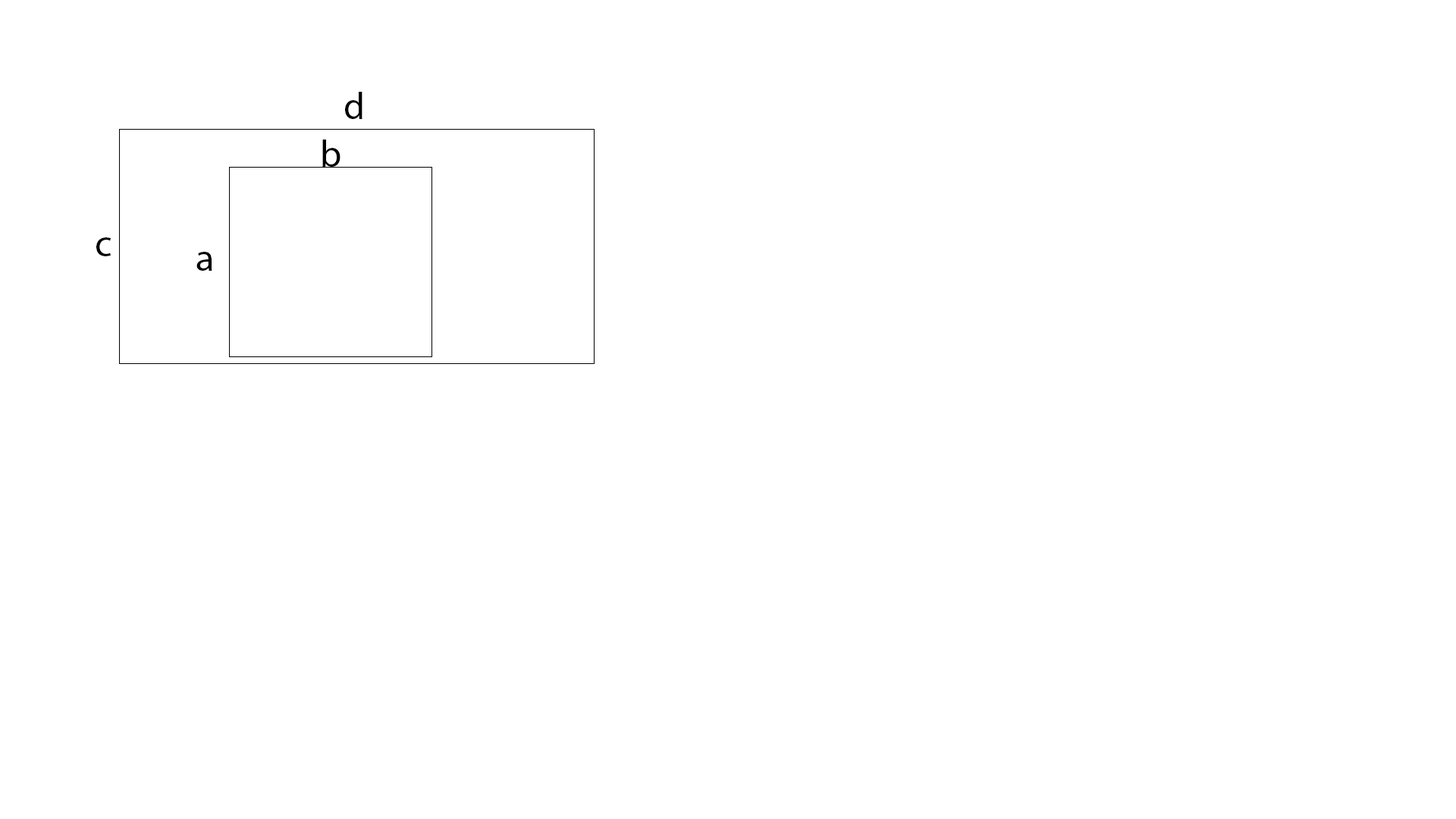
<style>
.page{position:relative;width:1456px;height:819px;background:#ffffff}
.page>*{position:absolute;margin:0}
.t1{font:9.1px "MyriadPro-Regular";color:#000000}
</style>
<div class="page">
<p class="t1" style="left:345px;top:92px;width:17px;height:27px">d</p>
<p class="t1" style="left:322px;top:140px;width:18px;height:27px">b</p>
<p class="t1" style="left:96px;top:237px;width:15px;height:19px">c</p>
<p class="t1" style="left:196px;top:252px;width:16px;height:19px">a</p>
</div>
